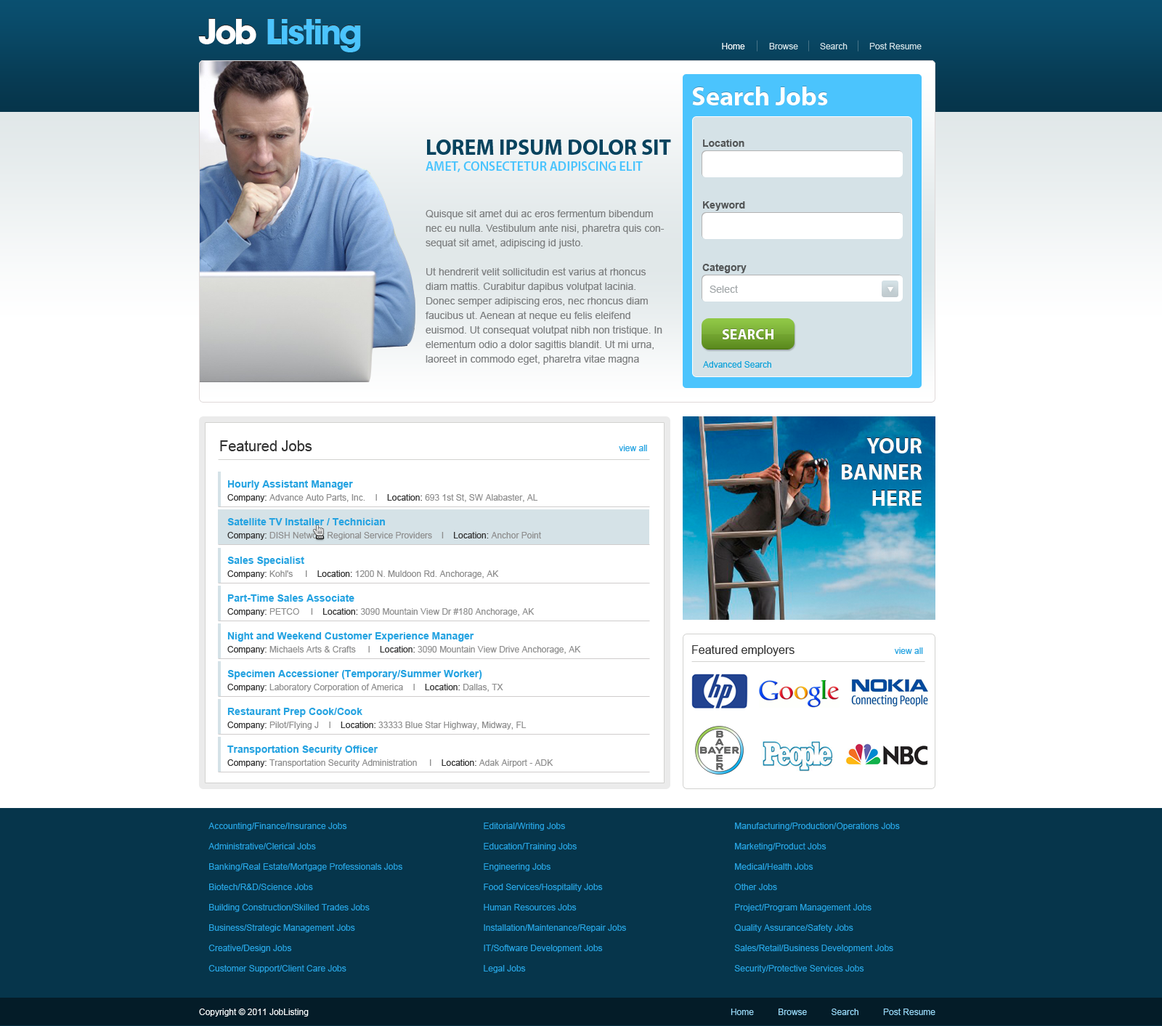
<style>
.page{position:relative;width:1162px;height:1026px;background:#ffffff}
.page>*{position:absolute;margin:0}
.t1{font:34.9px "AvantGBold";color:#4bc4fd}
.t2{font:34.9px "AvantGBold";color:#ffffff}
.t3{font:8.7px "ArialMT";color:#d5e2e7}
.t4{font:8.7px "ArialMT";color:#ffffff}
.t5{font:26.2px "MyriadPro-Bold";color:#eef2f4}
.t6{font:26.2px "MyriadPro-Bold";color:#ffffff}
.t7{font:13.1px "MyriadPro-Semibold";color:#4bc4fd;text-transform:uppercase}
.t8{font:21.8px "MyriadPro-Bold";color:#08435e;text-transform:uppercase}
.t9{font:10.2px "Arial-BoldMT";color:#535657}
.t10{font:10.2px/14.5px "ArialMT";color:#7e8081}
.t11{font:10.2px "ArialMT";color:#a3a8aa}
.t12{font:14.5px "MyriadPro-Bold";color:#ffffff;text-transform:uppercase}
.t13{font:8.7px "ArialMT";color:#10a2d9}
.t14{font:21.8px/26.2px "MyriadPro-Bold";color:#fdfefe;text-transform:uppercase}
.t15{font:14.5px "ArialMT";color:#333333}
.t16{font:8.7px "ArialMT";color:#26a3e1}
.t17{font:8.7px/13.1px "ArialMT";color:#8f8f8f}
.t18{font:10.2px "Arial-BoldMT";color:#26a3e1}
.t19{font:8.7px/13.1px "ArialMT";color:#333333}
.t20{font:10.2px/13.1px "Arial-BoldMT";color:#26a3e1}
.t21{font:11.6px "ArialMT";color:#333333}
.t22{font:8.7px/20.3px "ArialMT";color:#26a3e1}
.t23{font:8.7px "ArialMT";color:#98d9f8}
</style>
<div class="page">
<p class="t1" style="left:198px;top:18px;width:163px;height:34px"><span class="t2">Job </span>Listing</p>
<p class="t1" style="left:198px;top:19px;width:163px;height:33px"><span class="t2">Job </span>Listing</p>
<p class="t3" style="left:722px;top:43px;width:200px;height:6px"><span class="t4">Home</span>          Browse         Search         Post Resume</p>
<p class="t5" style="left:692px;top:86px;width:136px;height:19px;opacity:0.35">Search Jobs</p>
<p class="t6" style="left:692px;top:86px;width:136px;height:19px">Search Jobs</p>
<p class="t7" style="left:426px;top:139px;width:245px;height:33px"><span class="t8">Lorem ipsum dolor sit </span>amet, consectetur adipiscing elit</p>
<p class="t9" style="left:703px;top:139px;width:42px;height:8px">Location</p>
<p class="t10" style="left:426px;top:209px;width:239px;height:156px">Quisque sit amet dui ac eros fermentum bibendum nec eu nulla. Vestibulum ante nisi, pharetra quis consequat sit amet, adipiscing id justo. <br><br>Ut hendrerit velit sollicitudin est varius at rhoncus diam mattis. Curabitur dapibus volutpat lacinia. Donec semper adipiscing eros, nec rhoncus diam faucibus ut. Aenean at neque eu felis eleifend euismod. Ut consequat volutpat nibh non tristique. In elementum odio a dolor sagittis blandit. Ut mi urna, laoreet in commodo eget, pharetra vitae magna</p>
<p class="t9" style="left:703px;top:201px;width:42px;height:10px">Keyword</p>
<p class="t9" style="left:703px;top:264px;width:44px;height:9px">Category</p>
<p class="t11" style="left:710px;top:285px;width:28px;height:8px">Select</p>
<p class="t12" style="left:722px;top:328px;width:52px;height:11px;opacity:0.34">Search</p>
<p class="t12" style="left:722px;top:329px;width:52px;height:10px">Search</p>
<p class="t13" style="left:703px;top:361px;width:69px;height:7px">Advanced Search</p>
<p class="t14" style="left:842px;top:437px;width:81px;height:68px;text-align:right">Your Banner Here</p>
<p class="t15" style="left:220px;top:440px;width:92px;height:11px">Featured Jobs</p>
<p class="t16" style="left:619px;top:445px;width:28px;height:6px">view all</p>
<p class="t14" style="left:842px;top:438px;width:81px;height:68px;text-align:right">Your Banner Here</p>
<p class="t17" style="left:227px;top:480px;width:311px;height:22px"><span class="t18">Hourly Assistant Manager<br></span><span class="t19">Company: </span>Advance Auto Parts, Inc.    I    <span class="t19">Location:</span> 693 1st St, SW Alabaster, AL</p>
<p class="t17" style="left:227px;top:518px;width:314px;height:22px"><span class="t20">Satellite TV Installer / Technician <br></span><span class="t19">Company: </span>DISH Network Regional Service Providers    I    <span class="t19">Location:</span> Anchor Point</p>
<p class="t17" style="left:227px;top:557px;width:272px;height:21px"><span class="t20">Sales Specialist <br></span><span class="t19">Company: </span>Kohl's     I    <span class="t19">Location:</span> 1200 N. Muldoon Rd. Anchorage, AK</p>
<p class="t17" style="left:227px;top:594px;width:308px;height:22px"><span class="t20">Part-Time Sales Associate <br></span><span class="t19">Company: </span>PETCO    I    <span class="t19">Location:</span> 3090 Mountain View Dr #180 Anchorage, AK</p>
<p class="t20" style="left:227px;top:632px;width:354px;height:22px">Night and Weekend Customer Experience Manager <br><span class="t19">Company: </span><span class="t17">Michaels Arts &amp; Crafts     I    </span><span class="t19">Location:</span><span class="t17"> 3090 Mountain View Drive Anchorage, AK</span></p>
<p class="t21" style="left:692px;top:645px;width:103px;height:11px">Featured employers</p>
<p class="t16" style="left:894px;top:647px;width:29px;height:7px">view all</p>
<p class="t20" style="left:227px;top:670px;width:276px;height:22px">Specimen Accessioner (Temporary/Summer Worker)<br><span class="t19">Company: </span><span class="t17">Laboratory Corporation of America    I    </span><span class="t19">Location:</span><span class="t17"> Dallas, TX</span></p>
<p class="t17" style="left:227px;top:708px;width:300px;height:21px"><span class="t20">Restaurant Prep Cook/Cook<br></span><span class="t19">Company: </span>Pilot/Flying J    I    <span class="t19">Location:</span> 33333 Blue Star Highway, Midway, FL</p>
<p class="t17" style="left:227px;top:745px;width:327px;height:22px"><span class="t20">Transportation Security Officer <br></span><span class="t19">Company: </span>Transportation Security Administration     I    <span class="t19">Location:</span> Adak Airport - ADK</p>
<p class="t22" style="left:209px;top:822px;width:193px;height:151px">Accounting/Finance/Insurance Jobs<br>    Administrative/Clerical Jobs<br>    Banking/Real Estate/Mortgage Professionals Jobs<br>    Biotech/R&amp;D/Science Jobs<br>    Building Construction/Skilled Trades Jobs<br>    Business/Strategic Management Jobs<br>    Creative/Design Jobs<br>    Customer Support/Client Care Jobs</p>
<p class="t22" style="left:484px;top:822px;width:142px;height:151px">Editorial/Writing Jobs<br>    Education/Training Jobs<br>    Engineering Jobs<br>    Food Services/Hospitality Jobs<br>    Human Resources Jobs<br>    Installation/Maintenance/Repair Jobs<br>    IT/Software Development Jobs<br>    Legal Jobs</p>
<p class="t22" style="left:734px;top:822px;width:166px;height:151px">Manufacturing/Production/Operations Jobs<br>    Marketing/Product Jobs<br>    Medical/Health Jobs<br>    Other Jobs<br>    Project/Program Management Jobs<br>    Quality Assurance/Safety Jobs<br>    Sales/Retail/Business Development Jobs<br>    Security/Protective Services Jobs</p>
<p class="t4" style="left:199px;top:1008px;width:110px;height:8px">Copyright © 2011 JobListing</p>
<p class="t23" style="left:731px;top:1008px;width:205px;height:7px">Home          Browse          Search          Post Resume</p>
</div>
